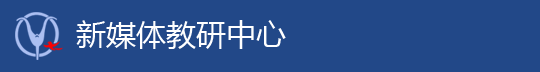
<style>
.page{position:relative;width:540px;height:72px;background:#224888}
.page>*{position:absolute;margin:0}
.t1{font:30px "MicrosoftYaHei";color:#ffffff}
</style>
<div class="page">
<p class="t1" style="left:76px;top:20px;width:210px;height:29px">新媒体教研中心</p>
</div>
